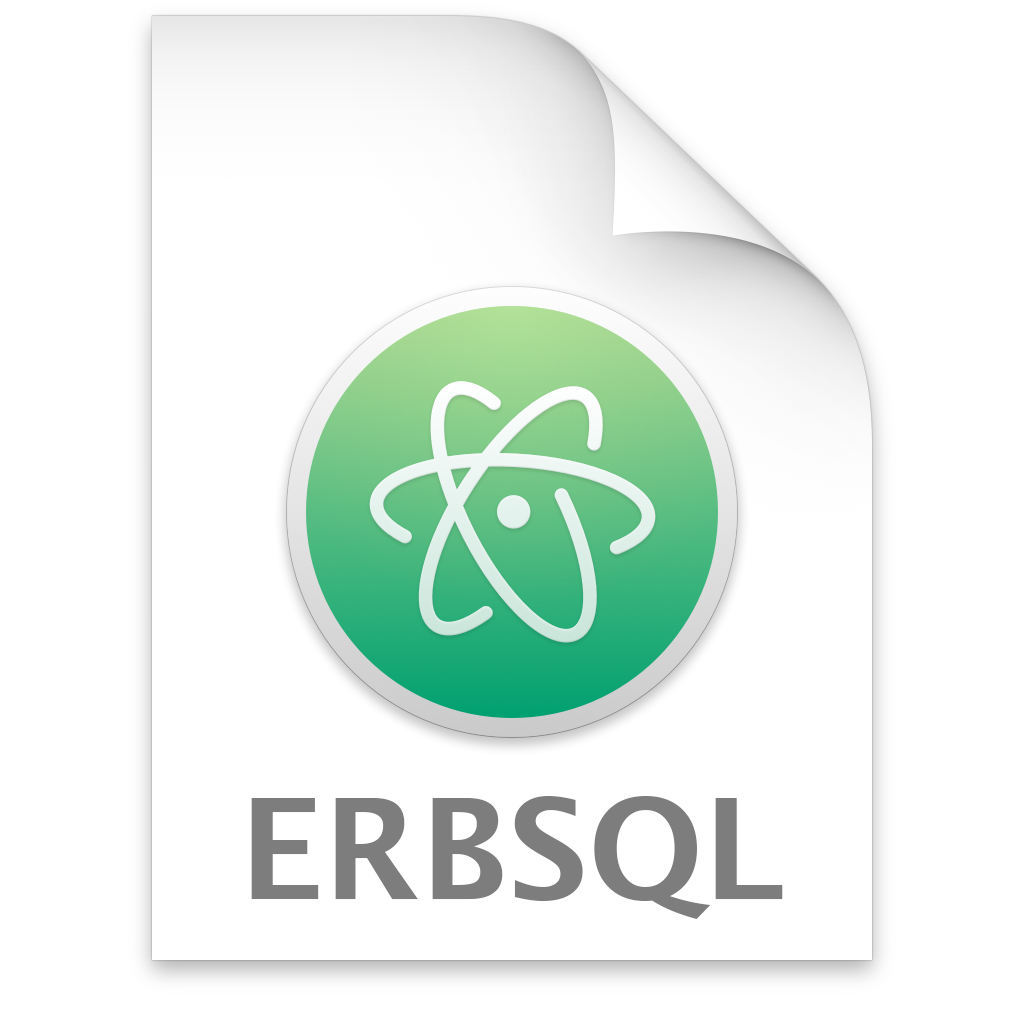
<style>
.page{position:relative;width:1024px;height:1024px;background:#ffffff}
.page>*{position:absolute;margin:0}
.t1{font:140px "LucidaGrande-Bold";color:#7d7d7d}
</style>
<div class="page">
<p class="t1" style="left:251px;top:796px;width:532px;height:123px">ERBSQL</p>
</div>
